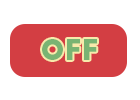
<style>
.page{position:relative;width:140px;height:100px;background:#ffffff}
.page>*{position:absolute;margin:0}
.t1{font:28px "BigJohn";color:#79b473}
</style>
<div class="page">
<p class="t1" style="left:42px;top:39px;width:55px;height:21px">off</p>
</div>
